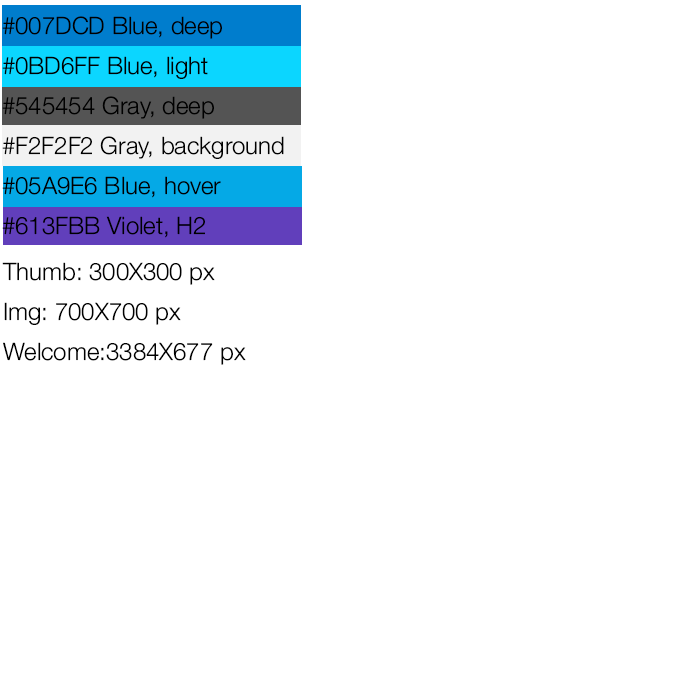
<style>
.page{position:relative;width:700px;height:700px;background:#ffffff}
.page>*{position:absolute;margin:0}
.t1{font:24px/40px "HelveticaNeue-Light";color:#000000}
</style>
<div class="page">
<p class="t1" style="left:2px;top:16px;width:282px;height:222px">#007DCD Blue, deep<br>#0BD6FF Blue, light<br>#545454 Gray, deep<br>#F2F2F2 Gray, background<br>#05A9E6 Blue, hover<br>#613FBB Violet, H2</p>
<p class="t1" style="left:2px;top:262px;width:244px;height:103px">Thumb: 300X300 px<br>Img: 700X700 px<br>Welcome:3384X677 px</p>
</div>
